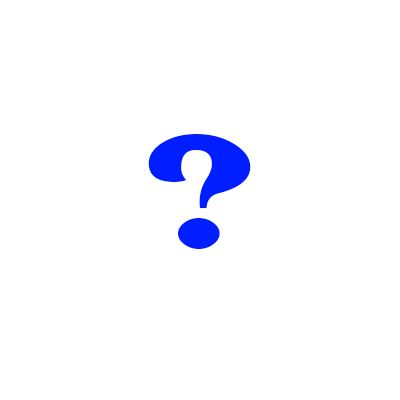
<style>
.page{position:relative;width:400px;height:400px;background:#ffffff}
.page>*{position:absolute;margin:0}
.t1{font:165.4px "LatinWide";letter-spacing:-0.075em;color:#001eff;scale:0.86 1}
</style>
<div class="page">
<p class="t1" style="left:148px;top:134px;width:103px;height:115px">?</p>
</div>
